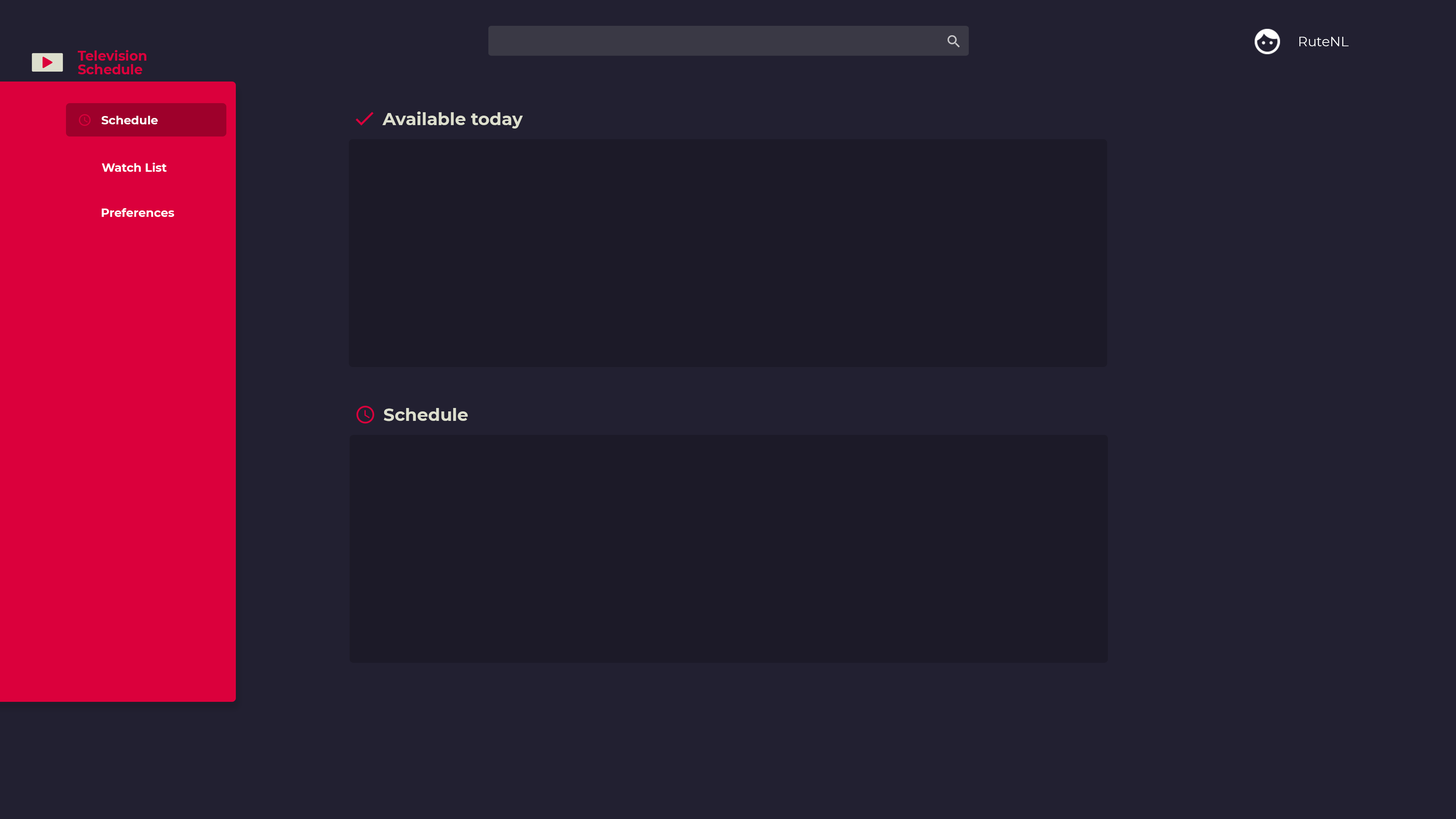
<style>
.page{position:relative;width:1456px;height:819px;background:#222031}
.page>*{position:absolute;margin:0}
.t1{font:13.3px "Montserrat-Regular";color:#ffffff}
.t2{font:13.5px "Montserrat-Bold";color:#db003c}
.t3{font:17.3px "Montserrat-Bold";color:#dcdecd}
.t4{font:11.6px "Montserrat-Bold";color:#ffffff}
</style>
<div class="page">
<p class="t1" style="left:1299px;top:37px;width:50px;height:9px">RuteNL</p>
<p class="t2" style="left:78px;top:50px;width:68px;height:11px">Television</p>
<p class="t2" style="left:78px;top:64px;width:65px;height:10px">Schedule</p>
<p class="t3" style="left:382px;top:111px;width:141px;height:18px">Available today</p>
<p class="t4" style="left:101px;top:116px;width:57px;height:8px">Schedule</p>
<p class="t4" style="left:102px;top:163px;width:65px;height:9px">Watch List</p>
<p class="t4" style="left:102px;top:208px;width:72px;height:9px">Preferences</p>
<p class="t3" style="left:384px;top:408px;width:84px;height:13px">Schedule</p>
</div>
